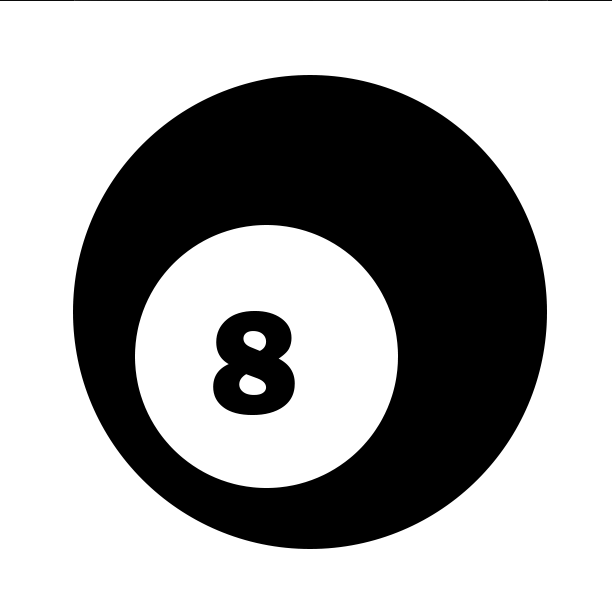
<style>
.page{position:relative;width:612px;height:612px;background:#ffffff}
.page>*{position:absolute;margin:0}
.t1{font:150px "FranklinGothic-Heavy";color:#000000}
</style>
<div class="page">
<p class="t1" style="left:213px;top:310px;width:82px;height:104px">8</p>
</div>
